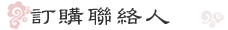
<style>
.page{position:relative;width:228px;height:30px;background:#ffffff}
.page>*{position:absolute;margin:0}
.t1{font:27.9px "DFKuoTaiBeiStd-W4";letter-spacing:0.025em;color:#333333}
</style>
<div class="page">
<p class="t1" style="left:30px;top:7px;width:140px;height:18px">訂購聯絡人</p>
</div>
